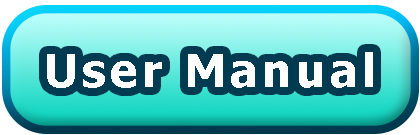
<style>
.page{position:relative;width:420px;height:135px}
.page>*{position:absolute;margin:0}
.t1{font:45.8px "Tahoma-Bold";letter-spacing:0.1em;color:#ffffff}
</style>
<div class="page">
<p class="t1" style="left:47px;top:52px;width:326px;height:36px">User Manual</p>
</div>
